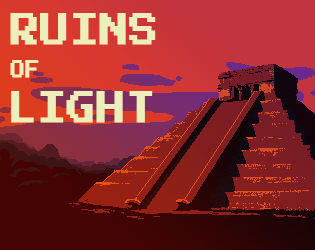
<style>
.page{position:relative;width:315px;height:250px}
.page>*{position:absolute;margin:0}
.t1{font:36px/48px "PressStart2P-Regular";color:#eeeeba;font-weight:bold;scale:0.8 1}
.t2{font:18px/30px "PressStart2P-Regular";color:#eeeeba;font-weight:bold;scale:0.8 1}
</style>
<div class="page">
<p class="t1" style="left:10px;top:13px;width:146px;height:110px">RUINS <br><span class="t2">OF<br></span>LIGHT</p>
</div>
